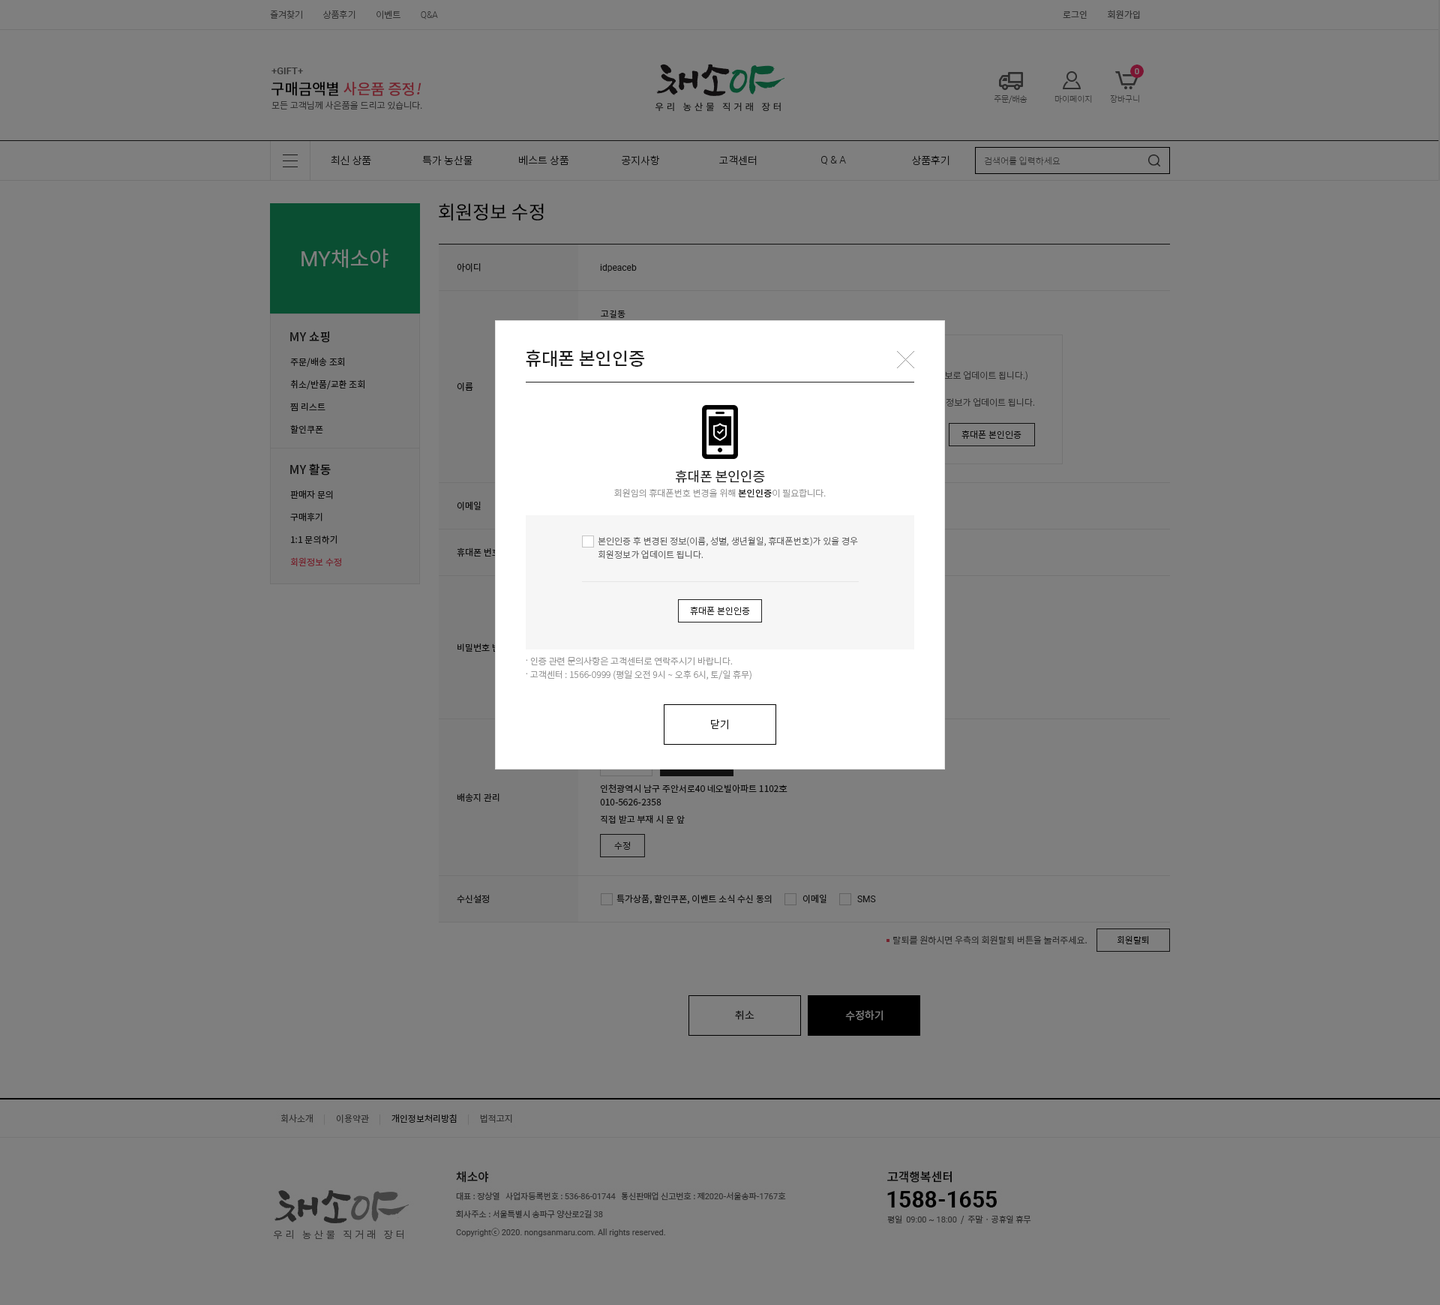
<style>
.page{position:relative;width:1440px;height:1305px;background:#7f7f7f}
.page>*{position:absolute;margin:0}
.t1{font:9px "NotoSansCJKkr-Light";color:#333333}
.t2{font:9px "Roboto-Light";color:#333333}
.t3{font:9px "NotoSansCJKkr-DemiLight";color:#333333}
.t4{font:9.8px "Roboto-Medium";color:#333333}
.t5{font:15px "NotoSansCJKkr-Medium"}
.t6{font:15px "NotoSansCJKkr-Medium";font-style:italic}
.t7{font:8.2px "NotoSansCJKkr-Thin";color:#333333}
.t8{font:10.5px "NotoSansCJKkr-Light";color:#222222}
.t9{font:10.5px "Roboto-Light";color:#222222}
.t10{font:9px "NotoSansCJKkr-Thin";color:#333333}
.t11{font:18.8px "NotoSansCJKkr-Regular";color:#000000}
.t12{font:21px "NotoSansCJKkr-Regular";color:#7f7f7f}
.t13{font:21px "Roboto-Regular";color:#7f7f7f}
.t14{font:9px "NotoSansCJKkr-Regular";color:#222222}
.t15{font:9px "Roboto-Regular";color:#222222}
.t16{font:12px "NotoSansCJKkr-Medium";color:#222222}
.t17{font:18px "NotoSansCJKkr-Medium";color:#222222}
.t18{font:9px/22.5px "NotoSansCJKkr-Regular";color:#222222}
.t19{font:9px "NotoSansCJKkr-Light";color:#222222}
.t20{font:13.5px "NotoSansCJKkr-Regular";color:#222222}
.t21{font:9px/22.5px "NotoSansCJKkr-Regular";color:#ea475c}
.t22{font:9px "NotoSansCJKkr-Light";color:#999999}
.t23{font:9px "NotoSansCJKkr-Light";color:#222222;font-weight:bold}
.t24{font:9px/13.5px "NotoSansCJKkr-Light";color:#666666}
.t25{font:9px/13.5px "NotoSansCJKkr-Light";color:#999999}
.t26{font:10.5px "NotoSansCJKkr-DemiLight";color:#222222}
.t27{font:9px/13.5px "NotoSansCJKkr-Regular";color:#222222}
.t28{font:9px "NotoSansCJKkr-Regular";color:#333333}
.t29{font:10.5px "NotoSansCJKkr-DemiLight";color:#7f7f7f}
</style>
<div class="page">
<p class="t1" style="left:270px;top:10px;width:168px;height:10px">즐겨찾기          상품후기          이벤트          <span class="t2">Q&amp;A</span></p>
<p class="t3" style="left:1063px;top:10px;width:77px;height:10px">로그인          회원가입</p>
<p class="t4" style="left:272px;top:68px;width:31px;height:6px">+GIFT+</p>
<p class="t5" style="left:272px;top:82px;width:150px;height:14px">구매금액별 사은품 증정<span class="t6">!</span></p>
<p class="t1" style="left:272px;top:100px;width:150px;height:10px">모든 고객님께 사은품을 드리고 있습니다.</p>
<p class="t7" style="left:994px;top:94px;width:34px;height:10px">주문/배송</p>
<p class="t7" style="left:1054px;top:95px;width:38px;height:9px">마이페이지</p>
<p class="t7" style="left:1110px;top:94px;width:29px;height:10px">장바구니</p>
<p class="t8" style="left:331px;top:155px;width:40px;height:10px">최신 상품</p>
<p class="t8" style="left:422px;top:155px;width:50px;height:11px">특가 농산물</p>
<p class="t8" style="left:519px;top:155px;width:50px;height:11px">베스트 상품</p>
<p class="t8" style="left:622px;top:155px;width:38px;height:11px">공지사항</p>
<p class="t8" style="left:719px;top:155px;width:38px;height:11px">고객센터</p>
<p class="t9" style="left:821px;top:156px;width:25px;height:9px">Q &amp; A</p>
<p class="t8" style="left:912px;top:155px;width:38px;height:11px">상품후기</p>
<p class="t10" style="left:984px;top:156px;width:76px;height:10px">검색어를 입력하세요</p>
<p class="t11" style="left:439px;top:203px;width:105px;height:18px">회원정보 수정</p>
<p class="t12" style="left:302px;top:248px;width:86px;height:20px"><span class="t13">MY</span>채소야</p>
<p class="t14" style="left:457px;top:263px;width:24px;height:9px">아이디</p>
<p class="t15" style="left:600px;top:264px;width:37px;height:8px">idpeaceb</p>
<p class="t14" style="left:601px;top:310px;width:25px;height:8px">고길동</p>
<p class="t16" style="left:290px;top:331px;width:39px;height:12px">MY 쇼핑</p>
<p class="t17" style="left:526px;top:350px;width:118px;height:18px">휴대폰 본인인증</p>
<p class="t18" style="left:290px;top:357px;width:74px;height:77px">주문/배송 조회<br>취소/반품/교환 조회<br>찜 리스트<br>할인쿠폰</p>
<p class="t14" style="left:457px;top:382px;width:16px;height:10px">이름</p>
<p class="t19" style="left:962px;top:430px;width:60px;height:10px">휴대폰 본인인증</p>
<p class="t16" style="left:290px;top:464px;width:41px;height:12px">MY 활동</p>
<p class="t20" style="left:676px;top:470px;width:89px;height:13px">휴대폰 본인인증</p>
<p class="t18" style="left:290px;top:490px;width:51px;height:76px">판매자 문의<br>구매후기<br>1:1 문의하기<br><span class="t21">회원정보 수정</span></p>
<p class="t22" style="left:614px;top:488px;width:212px;height:10px">회원임의 휴대폰번호 변경을 위해 <span class="t23">본인인증</span>이 필요합니다.</p>
<p class="t14" style="left:457px;top:501px;width:24px;height:10px">이메일</p>
<p class="t24" style="left:598px;top:536px;width:260px;height:24px">본인인증 후 변경된 정보(이름, 성별, 생년월일, 휴대폰번호)가 있을 경우<br>회원정보가 업데이트 됩니다.</p>
<p class="t14" style="left:457px;top:548px;width:43px;height:9px">휴대폰 번호</p>
<p class="t19" style="left:690px;top:606px;width:60px;height:10px">휴대폰 본인인증</p>
<p class="t25" style="left:526px;top:656px;width:226px;height:24px">. 인증 관련 문의사항은 고객센터로 연락주시기 바랍니다.<br>. 고객센터 : 1566-0999 (평일 오전 9시 ~ 오후 6시, 토/일 휴무)</p>
<p class="t26" style="left:711px;top:719px;width:17px;height:11px">닫기</p>
<p class="t27" style="left:600px;top:784px;width:188px;height:22px">인천광역시 남구 주안서로40 네오빌아파트 1102호<br>010-5626-2358</p>
<p class="t14" style="left:457px;top:793px;width:43px;height:9px">배송지 관리</p>
<p class="t14" style="left:601px;top:814px;width:84px;height:10px">직접 받고 부재 시 문 앞</p>
<p class="t19" style="left:614px;top:842px;width:16px;height:8px">수정</p>
<p class="t14" style="left:616px;top:894px;width:156px;height:10px">특가상품, 할인쿠폰, 이벤트 소식 수신 동의</p>
<p class="t14" style="left:802px;top:894px;width:24px;height:10px">이메일</p>
<p class="t14" style="left:457px;top:895px;width:32px;height:8px">수신설정</p>
<p class="t15" style="left:857px;top:896px;width:19px;height:6px">SMS</p>
<p class="t28" style="left:893px;top:935px;width:194px;height:10px">탈퇴를 원하시면 우측의 회원탈퇴 버튼을 눌러주세요.</p>
<p class="t19" style="left:1118px;top:935px;width:31px;height:9px">회원탈퇴</p>
<p class="t26" style="left:735px;top:1010px;width:19px;height:10px">취소</p>
<p class="t29" style="left:845px;top:1010px;width:38px;height:11px">수정하기</p>
</div>
